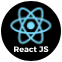
<style>
.page{position:relative;width:62px;height:62px;background:#000000}
.page>*{position:absolute;margin:0}
.t1{font:8px "Alexandria-Bold";color:#ffffff}
</style>
<div class="page">
<p class="t1" style="left:14px;top:46px;width:35px;height:7px">React JS</p>
</div>
